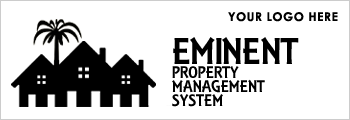
<style>
.page{position:relative;width:350px;height:120px;background:#ffffff}
.page>*{position:absolute;margin:0}
.t1{font:18px/14px "ARESSENCE";color:#000000}
.t2{font:40px/14px "ARESSENCE";color:#000000}
</style>
<div class="page">
<p class="t1" style="left:172px;top:37px;width:127px;height:70px"><span class="t2">EMINENT<br></span>PROPERTY<br>MANAGEMENT<br>SYSTEM</p>
</div>
